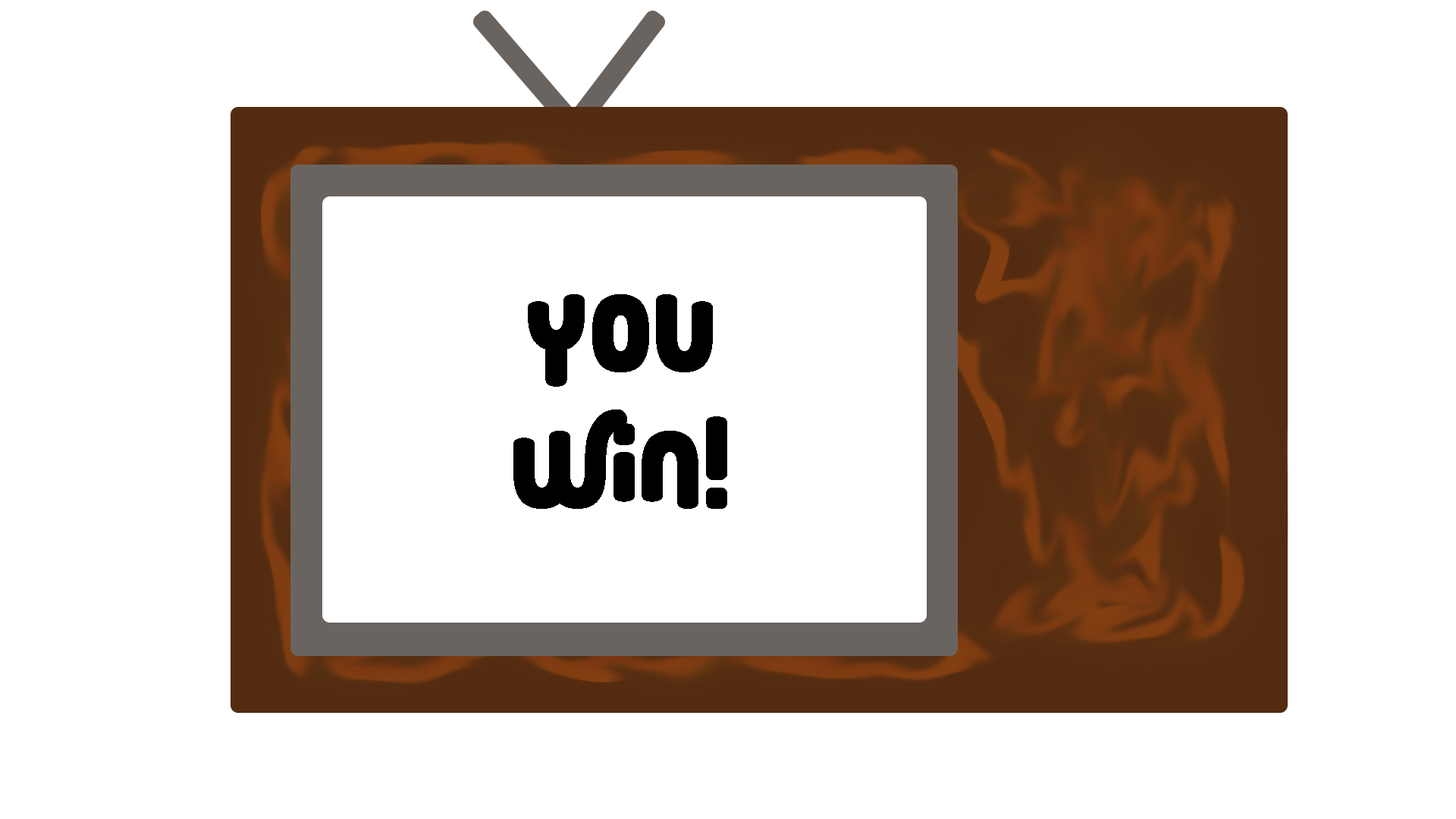
<style>
.page{position:relative;width:1456px;height:819px;background:#ffffff}
.page>*{position:absolute;margin:0}
.t1{font:113.7px "RoundyRainbows";color:#000000}
</style>
<div class="page">
<p class="t1" style="left:513px;top:294px;width:214px;height:215px;text-align:center">You<br>Win!</p>
</div>
